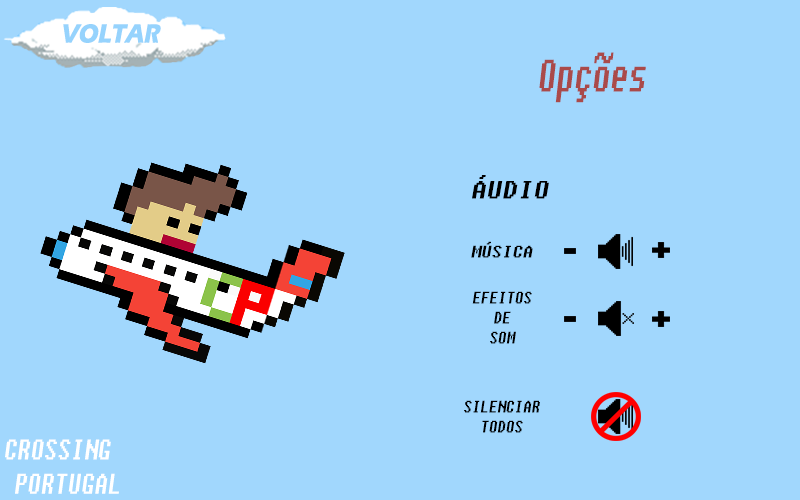
<style>
.page{position:relative;width:800px;height:500px;background:#a1d7fd}
.page>*{position:absolute;margin:0}
.t1{font:27.1px "ErasITC-Bold";color:#96d3fd;font-style:italic;scale:0.83 1}
.t2{font:45.3px "Fixedsys";color:#aa4a4a;font-style:italic;scale:0.64 1}
.t3{font:25px "Fixedsys";color:#000000;font-style:italic}
.t4{font:16.7px "Fixedsys";color:#000000;font-style:italic}
.t5{font:16.7px "Fixedsys";color:#000000;font-style:italic;scale:0.82 1}
.t6{font:28.4px "Fixedsys";color:#ffffff;font-style:italic;scale:0.76 1}
</style>
<div class="page">
<p class="t1" style="left:63px;top:24px;width:98px;height:19px">VOLTAR</p>
<p class="t2" style="left:539px;top:52px;width:107px;height:51px">Opções</p>
<p class="t3" style="left:472px;top:175px;width:77px;height:24px">ÁUDIO</p>
<p class="t4" style="left:471px;top:241px;width:62px;height:17px">MÚSICA</p>
<p class="t5" style="left:472px;top:291px;width:60px;height:53px;text-align:center">EFEITOS<br>DE<br>SOM</p>
<p class="t5" style="left:464px;top:400px;width:76px;height:33px;text-align:center">SILENCIAR<br>TODOS</p>
<p class="t6" style="left:5px;top:439px;width:114px;height:55px">CROSSING <br> PORTUGAL</p>
</div>
